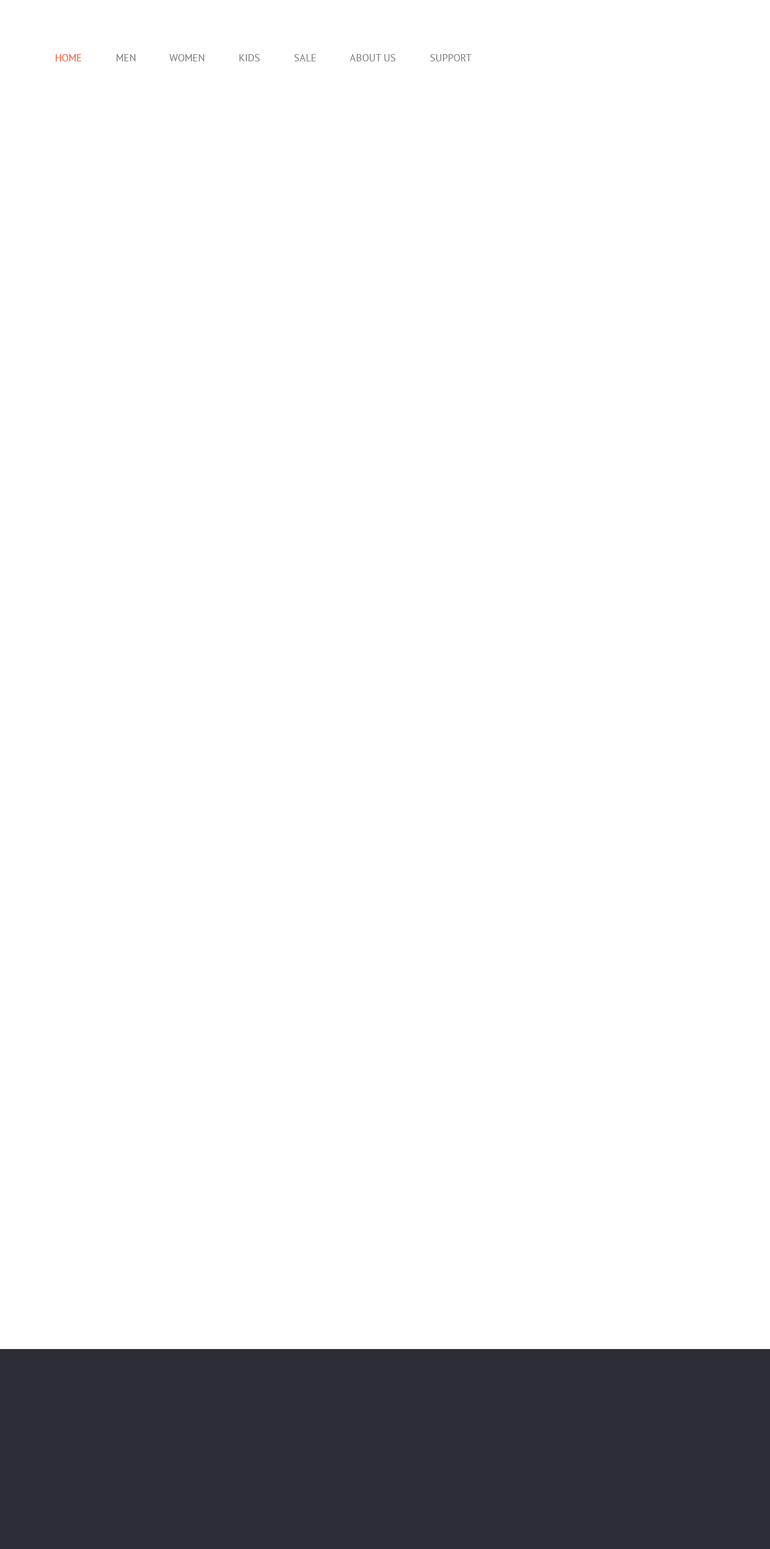
<style>
.page{position:relative;width:770px;height:1549px;background:#ffffff}
.page>*{position:absolute;margin:0}
.t1{font:10.1px "PTSans-Regular";color:#7e7f84;text-transform:uppercase}
.t2{font:10.1px "PTSans-Regular";color:#f45a40;text-transform:uppercase}
</style>
<div class="page">
<p class="t1" style="left:55px;top:54px;width:417px;height:7px"><span class="t2">Home            </span>MEN            WOMEN            KIDS            SALE            ABOUT US            SUPPORT</p>
</div>
